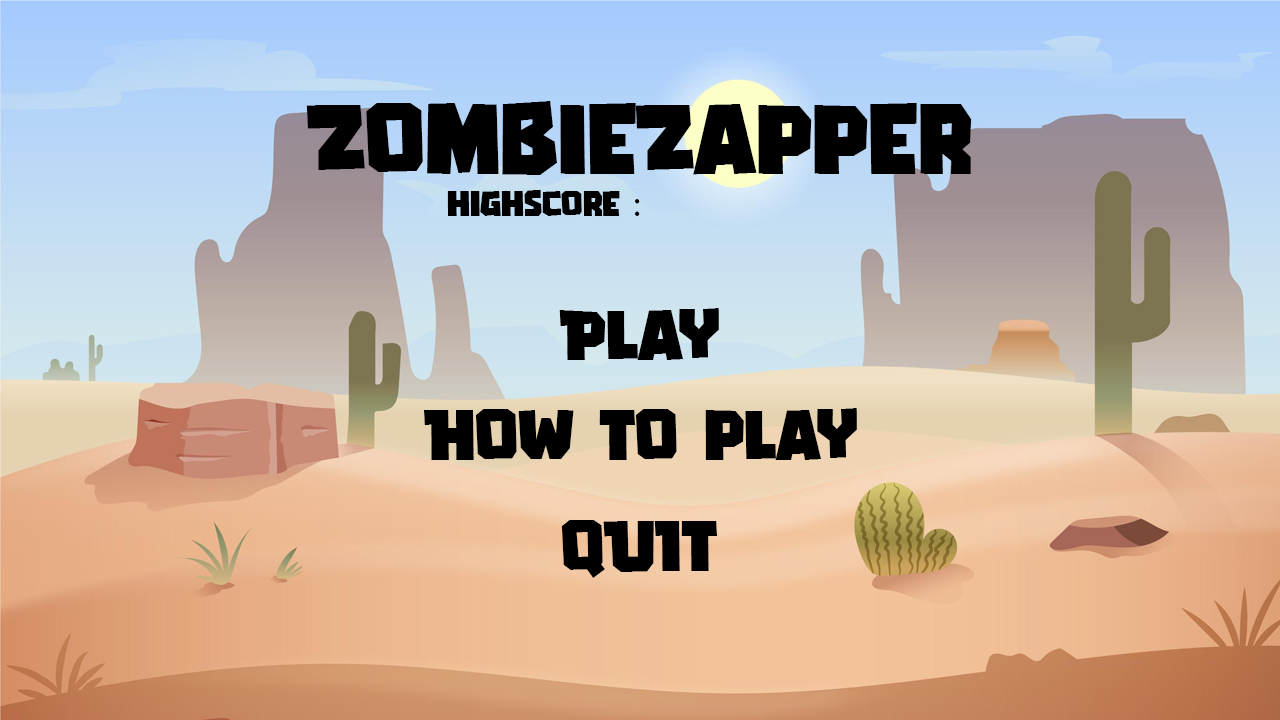
<style>
.page{position:relative;width:1280px;height:720px}
.page>*{position:absolute;margin:0}
.t1{font:100px "GAMERIA";color:#000000}
.t2{font:36px "GAMERIA";color:#000000}
.t3{font:36px "MyriadPro-Regular";color:#000000}
.t4{font:72px "GAMERIA";color:#000000}
</style>
<div class="page">
<p class="t1" style="left:306px;top:101px;width:666px;height:74px">ZombieZapper</p>
<p class="t2" style="left:447px;top:190px;width:193px;height:26px">highscore <span class="t3">:</span></p>
<p class="t4" style="left:559px;top:308px;width:160px;height:52px">Play</p>
<p class="t4" style="left:423px;top:408px;width:434px;height:52px">HOw to play</p>
<p class="t4" style="left:561px;top:520px;width:156px;height:58px">QUIT</p>
</div>
